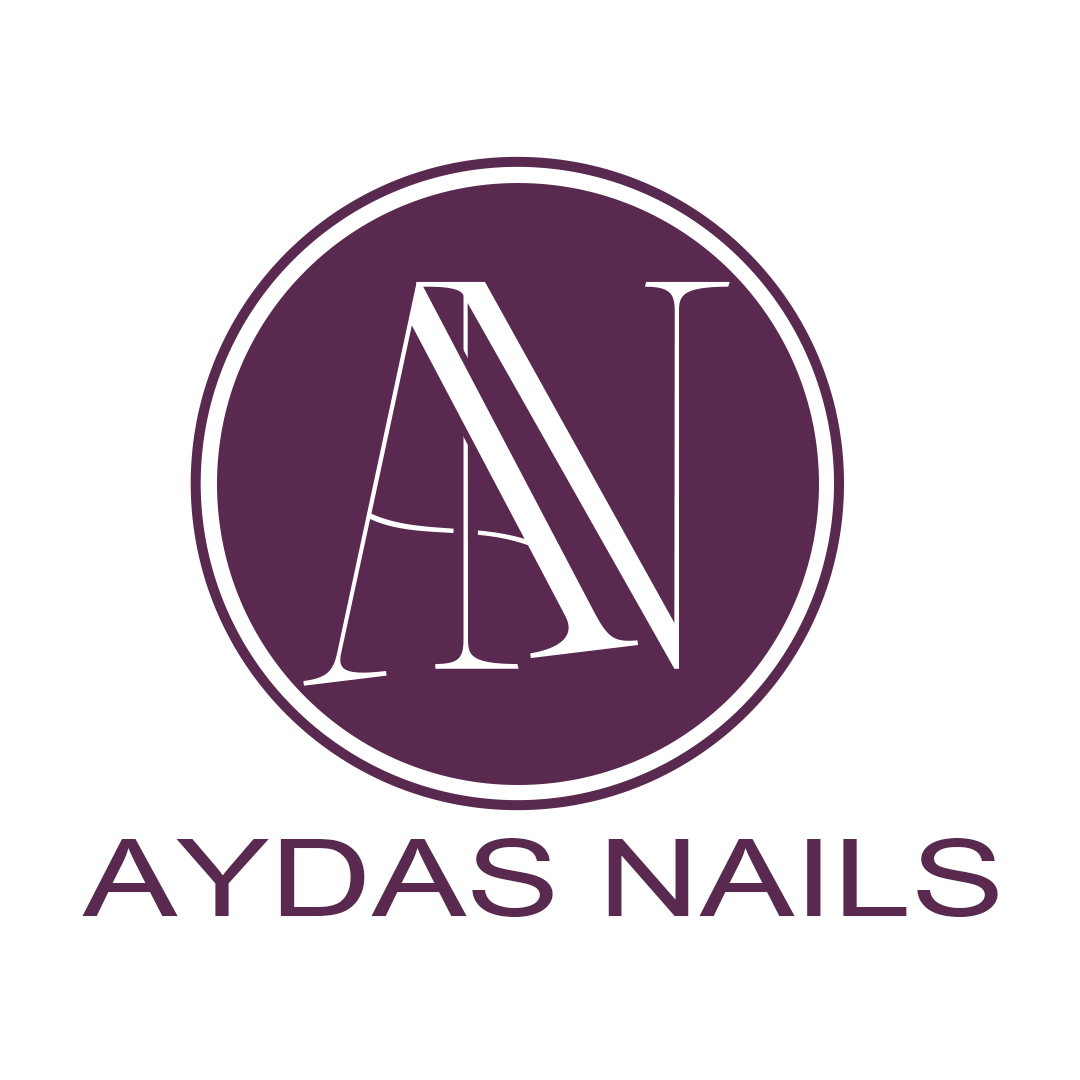
<style>
.page{position:relative;width:1080px;height:1080px;background:#ffffff}
.page>*{position:absolute;margin:0}
.t1{font:107.3px "ArialMT";color:#59294f;scale:1.31 1}
</style>
<div class="page">
<p class="t1" style="left:82px;top:838px;width:916px;height:79px">AYDAS NAILS</p>
</div>
